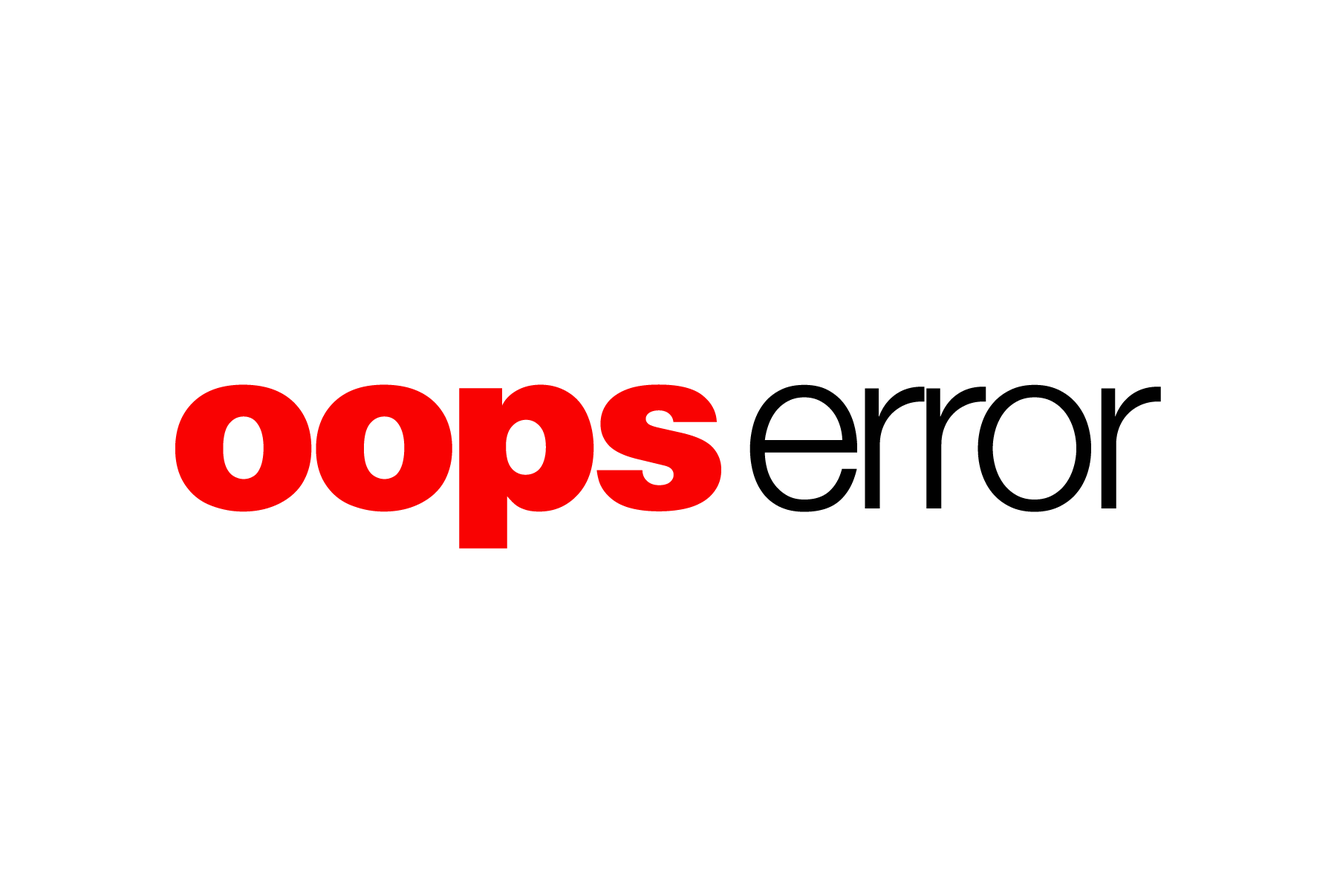
<style>
.page{position:relative;width:1337px;height:892px;background:#ffffff}
.page>*{position:absolute;margin:0}
.t1{font:232.2px "Helvetica-Black";letter-spacing:-0.06em;color:#f90202}
.t2{font:232.2px "HelveticaNeue-Light";letter-spacing:-0.05em;color:#010101}
</style>
<div class="page">
<p class="t1" style="left:175px;top:384px;width:546px;height:164px">oops</p>
<p class="t2" style="left:750px;top:384px;width:411px;height:128px">error</p>
</div>
